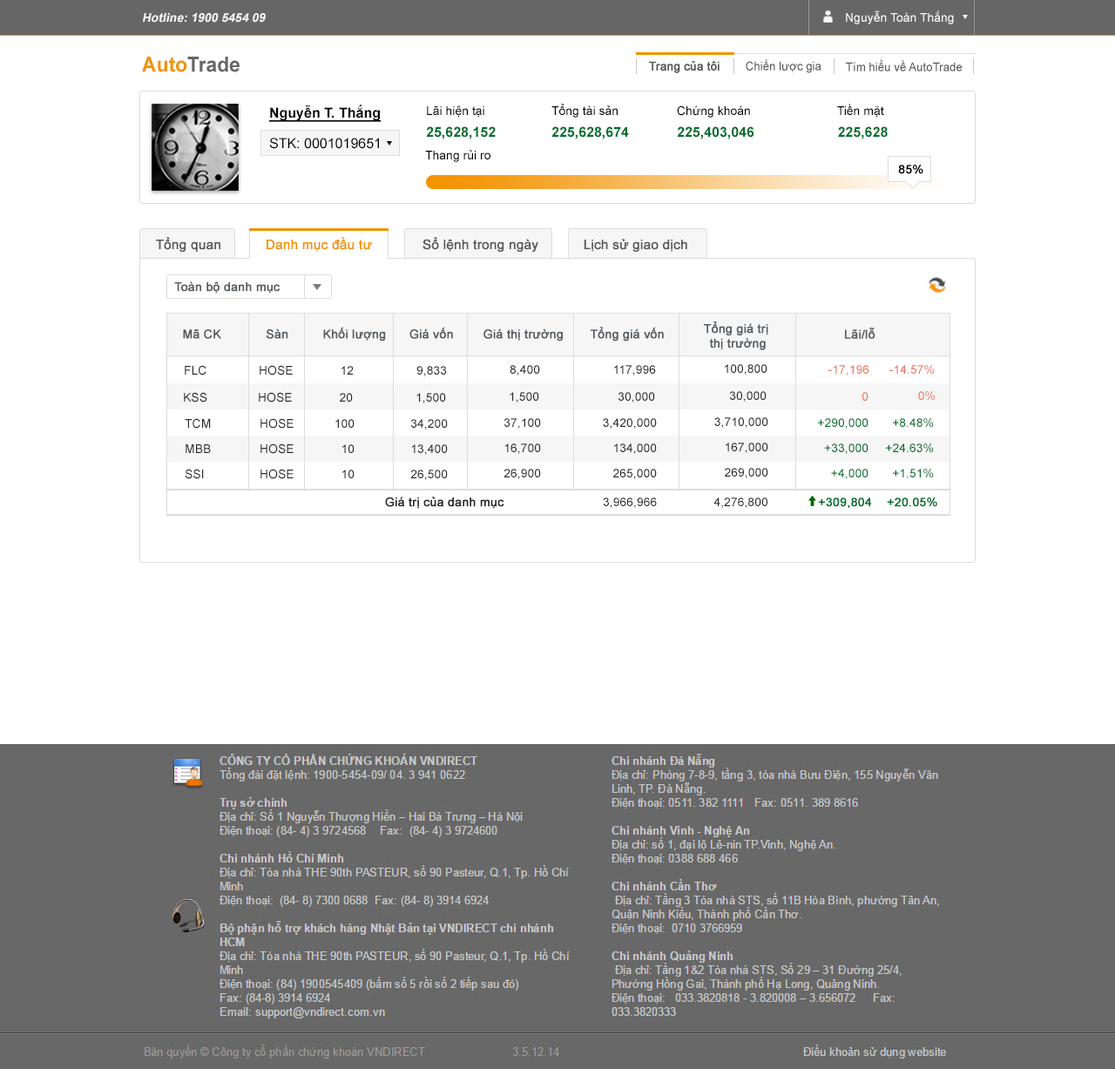
<style>
.page{position:relative;width:1115px;height:1069px;background:#ffffff}
.page>*{position:absolute;margin:0}
.t1{font:12.2px "Arial-BoldMT";color:#f6f6f6;font-style:italic}
.t2{font:12.2px "ArialMT";color:#f6f6f6}
.t3{font:20.9px "Arial-BoldMT";color:#666666;scale:0.95 1}
.t4{font:20.9px "Arial-BoldMT";color:#f39200;scale:0.95 1}
.t5{font:12.2px "ArialMT";color:#535551;font-weight:bold;scale:0.95 1}
.t6{font:12.2px "ArialMT";color:#535551;scale:0.95 1}
.t7{font:13.9px "Arial-BoldMT";color:#000000;text-decoration:underline}
.t8{font:12.2px "ArialMT";color:#000000}
.t9{font:13.9px "ArialMT";color:#000000}
.t10{font:13.9px "Arial-BoldMT";color:#006f2e}
.t11{font:12.2px "ArialMT";color:#000000;font-weight:bold}
.t12{font:13.1px "ArialMT";color:#58595b;font-weight:bold}
.t13{font:13.1px "ArialMT";color:#f39200;font-weight:bold}
.t14{font:12.2px "ArialMT";color:#565c61;font-weight:bold}
.t15{font:12.2px "ArialMT";color:#292929}
.t16{font:12.2px "ArialMT";color:#ef7460}
.t17{font:12.2px "ArialMT";color:#006f2e}
.t18{font:12.2px "ArialMT";color:#292929;font-weight:bold}
.t19{font:12.2px "ArialMT";color:#006f2e;font-weight:bold}
</style>
<div class="page">
<p class="t1" style="left:143px;top:13px;width:123px;height:10px">Hotline: 1900 5454 09</p>
<p class="t2" style="left:846px;top:10px;width:108px;height:14px">Nguyễn Toàn Thắng</p>
<p class="t3" style="left:142px;top:57px;width:98px;height:15px"><span class="t4">Auto</span>Trade</p>
<p class="t5" style="left:649px;top:61px;width:71px;height:12px">Trang của tôi</p>
<p class="t6" style="left:746px;top:59px;width:76px;height:14px">Chiến lược gia</p>
<p class="t6" style="left:846px;top:59px;width:117px;height:12px">Tìm hiểu về AutoTrade</p>
<p class="t7" style="left:269px;top:105px;width:113px;height:17px">Nguyễn T. Thắng</p>
<p class="t8" style="left:427px;top:104px;width:457px;height:14px">Lãi hiện tại   Tổng tài sản  Chứng khoán    Tiền mặt</p>
<p class="t9" style="left:269px;top:138px;width:110px;height:11px">STK: 0001019651</p>
<p class="t10" style="left:426px;top:126px;width:462px;height:13px">25,628,152  225,628,674  225,403,046    225,628</p>
<p class="t8" style="left:425px;top:150px;width:66px;height:12px">Thang rủi ro</p>
<p class="t11" style="left:898px;top:165px;width:26px;height:9px">85%</p>
<p class="t12" style="left:156px;top:237px;width:531px;height:15px">Tổng quan     <span class="t13">Danh mục đầu tư</span>      Sổ lệnh trong ngày      Lịch sử giao dịch</p>
<p class="t14" style="left:174px;top:281px;width:107px;height:13px">Toàn bộ danh mục</p>
<p class="t14" style="left:183px;top:327px;width:481px;height:15px">Mã CK            Sàn     Khối lượng   Giá vốn      Giá thị trường Tổng giá vốn</p>
<p class="t14" style="left:704px;top:322px;width:65px;height:28px;text-align:center">Tổng giá trị <br>thị trường</p>
<p class="t14" style="left:845px;top:328px;width:31px;height:11px">Lãi/lỗ</p>
<p class="t15" style="left:185px;top:365px;width:22px;height:11px">FLC</p>
<p class="t15" style="left:260px;top:365px;width:33px;height:11px">HOSE</p>
<p class="t15" style="left:342px;top:366px;width:12px;height:9px">12</p>
<p class="t15" style="left:417px;top:366px;width:30px;height:10px">9,833</p>
<p class="t15" style="left:510px;top:365px;width:30px;height:11px">8,400</p>
<p class="t15" style="left:614px;top:365px;width:42px;height:11px">117,996</p>
<p class="t15" style="left:725px;top:364px;width:43px;height:11px">100,800</p>
<p class="t16" style="left:828px;top:365px;width:42px;height:11px">-17,196</p>
<p class="t16" style="left:890px;top:365px;width:45px;height:9px">-14.57%</p>
<p class="t15" style="left:184px;top:392px;width:23px;height:11px">KSS</p>
<p class="t15" style="left:259px;top:392px;width:33px;height:11px">HOSE</p>
<p class="t15" style="left:340px;top:393px;width:13px;height:9px">20</p>
<p class="t15" style="left:417px;top:393px;width:29px;height:10px">1,500</p>
<p class="t15" style="left:510px;top:392px;width:29px;height:11px">1,500</p>
<p class="t15" style="left:619px;top:392px;width:36px;height:11px">30,000</p>
<p class="t15" style="left:730px;top:391px;width:37px;height:11px">30,000</p>
<p class="t16" style="left:863px;top:392px;width:6px;height:9px">0</p>
<p class="t16" style="left:918px;top:391px;width:18px;height:9px">0%</p>
<p class="t15" style="left:185px;top:418px;width:26px;height:11px">TCM</p>
<p class="t15" style="left:261px;top:418px;width:33px;height:11px">HOSE</p>
<p class="t15" style="left:335px;top:419px;width:20px;height:9px">100</p>
<p class="t15" style="left:411px;top:419px;width:37px;height:11px">34,200</p>
<p class="t15" style="left:505px;top:418px;width:36px;height:11px">37,100</p>
<p class="t15" style="left:603px;top:418px;width:54px;height:11px">3,420,000</p>
<p class="t15" style="left:715px;top:417px;width:54px;height:11px">3,710,000</p>
<p class="t17" style="left:818px;top:418px;width:51px;height:11px">+290,000</p>
<p class="t17" style="left:893px;top:418px;width:41px;height:9px">+8.48%</p>
<p class="t15" style="left:186px;top:444px;width:25px;height:9px">MBB</p>
<p class="t15" style="left:261px;top:444px;width:33px;height:10px">HOSE</p>
<p class="t15" style="left:342px;top:444px;width:13px;height:9px">10</p>
<p class="t15" style="left:411px;top:444px;width:37px;height:11px">13,400</p>
<p class="t15" style="left:505px;top:444px;width:36px;height:10px">16,700</p>
<p class="t15" style="left:614px;top:444px;width:43px;height:10px">134,000</p>
<p class="t15" style="left:726px;top:443px;width:43px;height:10px">167,000</p>
<p class="t17" style="left:824px;top:444px;width:45px;height:10px">+33,000</p>
<p class="t17" style="left:886px;top:444px;width:48px;height:8px">+24.63%</p>
<p class="t15" style="left:185px;top:469px;width:19px;height:10px">SSI</p>
<p class="t15" style="left:261px;top:469px;width:33px;height:10px">HOSE</p>
<p class="t15" style="left:342px;top:470px;width:13px;height:8px">10</p>
<p class="t15" style="left:410px;top:470px;width:38px;height:10px">26,500</p>
<p class="t15" style="left:504px;top:469px;width:37px;height:10px">26,900</p>
<p class="t15" style="left:613px;top:469px;width:44px;height:10px">265,000</p>
<p class="t15" style="left:725px;top:468px;width:44px;height:10px">269,000</p>
<p class="t17" style="left:831px;top:469px;width:38px;height:10px">+4,000</p>
<p class="t17" style="left:893px;top:469px;width:41px;height:8px">+1.51%</p>
<p class="t18" style="left:385px;top:497px;width:120px;height:12px">Giá trị của danh mục</p>
<p class="t15" style="left:603px;top:498px;width:335px;height:11px">3,966,966       4,276,800         <span class="t19">+309,804    +20.05%</span></p>
</div>
